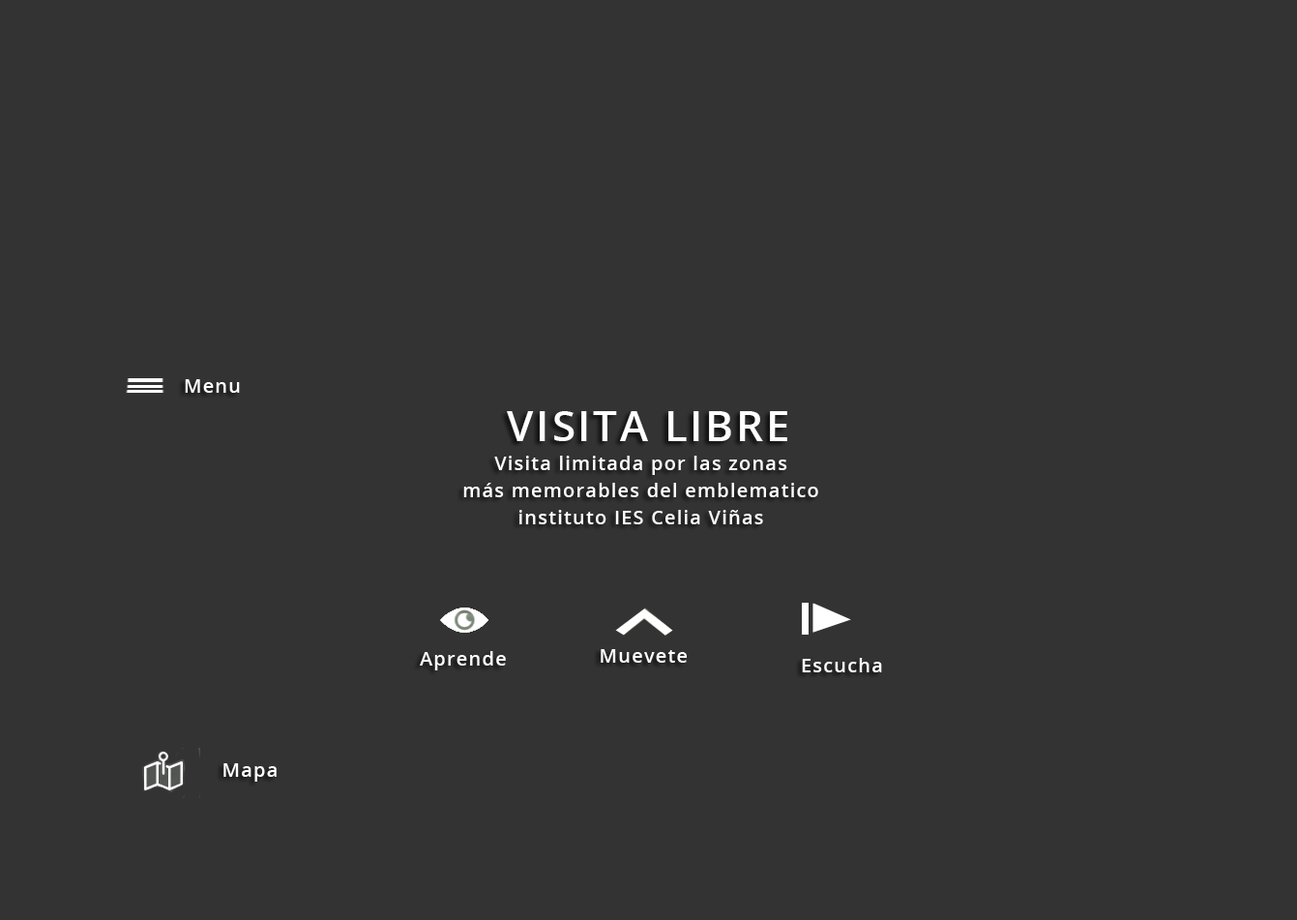
<style>
.page{position:relative;width:1297px;height:920px;background:#333333}
.page>*{position:absolute;margin:0}
.t1{font:19.4px "OpenSans-Semibold";letter-spacing:0.06em;color:#ffffff}
.t2{font:42.6px "OpenSans-Semibold";letter-spacing:0.06em;color:#ffffff}
.t3{font:19.4px/27.1px "OpenSans-Semibold";letter-spacing:0.06em;color:#ffffff}
</style>
<div class="page">
<p class="t1" style="left:185px;top:379px;width:55px;height:14px">Menu</p>
<p class="t2" style="left:507px;top:411px;width:280px;height:30px">VISITA LIBRE</p>
<p class="t3" style="left:463px;top:455px;width:355px;height:69px;text-align:center">Visita limitada por las zonas<br>más memorables del emblematico<br>instituto IES Celia Viñas</p>
<p class="t1" style="left:420px;top:651px;width:86px;height:19px">Aprende</p>
<p class="t1" style="left:600px;top:649px;width:87px;height:13px">Muevete</p>
<p class="t1" style="left:802px;top:658px;width:80px;height:14px">Escucha</p>
<p class="t1" style="left:223px;top:763px;width:54px;height:18px">Mapa</p>
</div>
